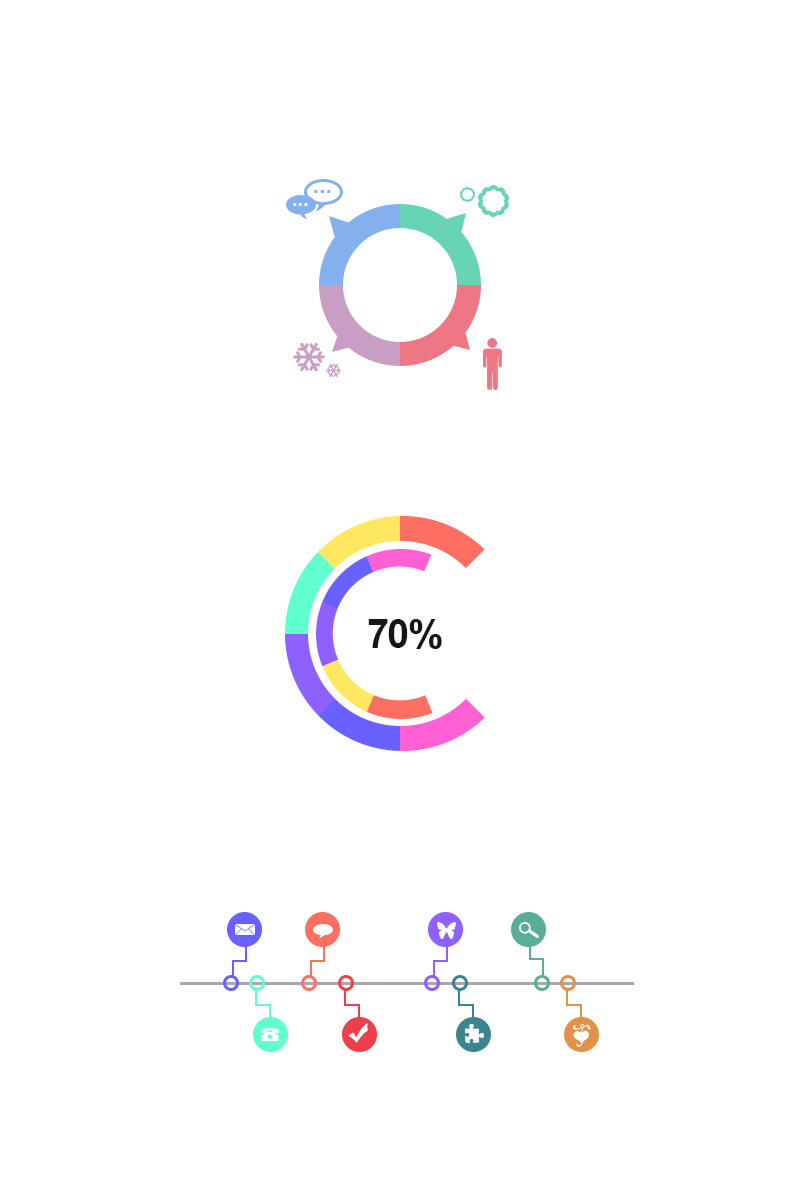
<style>
.page{position:relative;width:800px;height:1200px;background:#ffffff}
.page>*{position:absolute;margin:0}
.t1{font:24px "Arial-BoldMT";color:#84b1ed}
.t2{font:20px "Arial-BoldMT";color:#ffffff}
.t3{font:40px "Arial-BoldMT";letter-spacing:-0.04em;color:#171616}
</style>
<div class="page">
<p class="t1" style="left:314px;top:190px;width:17px;height:3px">...</p>
<p class="t2" style="left:293px;top:203px;width:15px;height:3px">...</p>
<p class="t3" style="left:368px;top:619px;width:74px;height:30px">70%</p>
</div>
